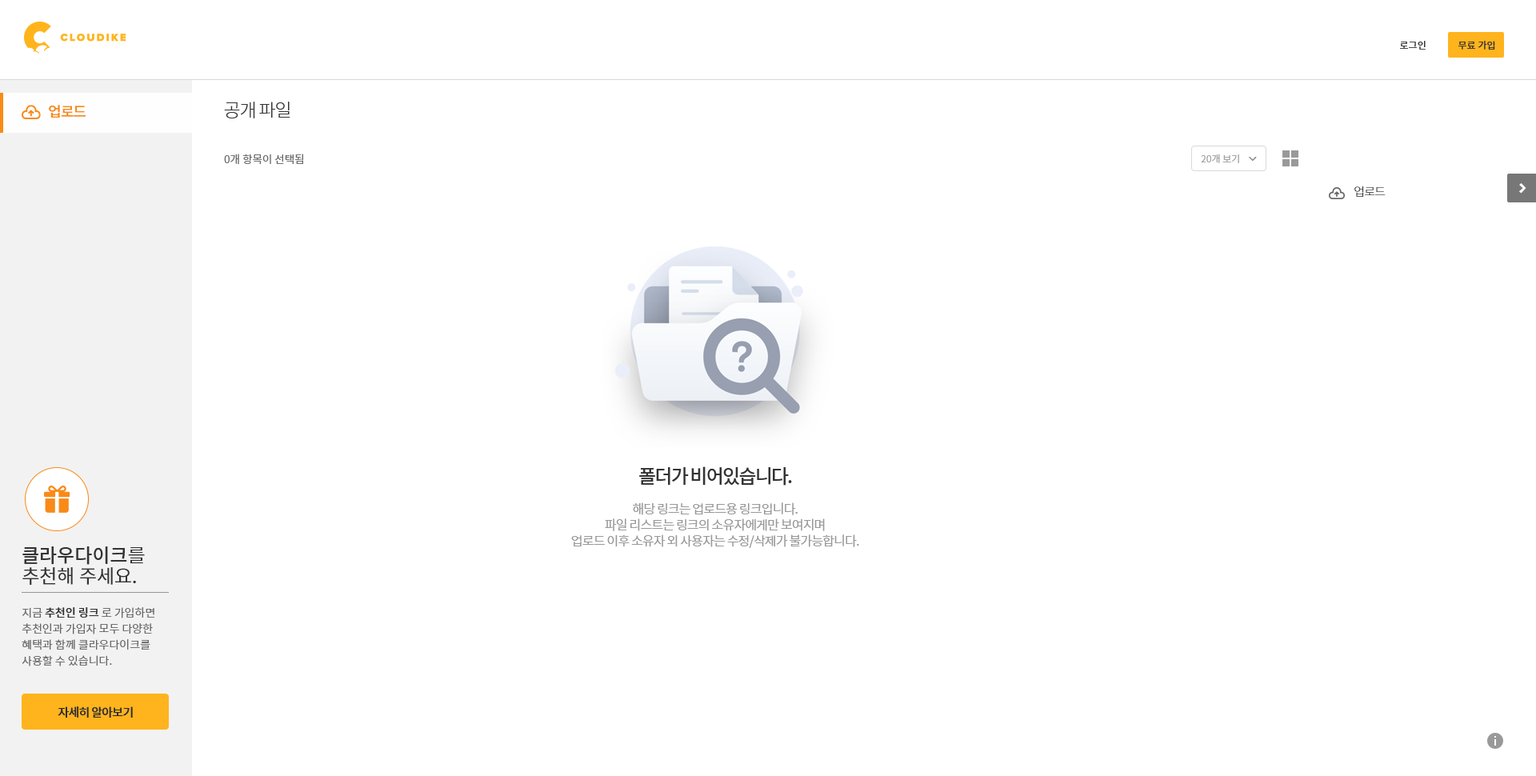
<style>
.page{position:relative;width:1536px;height:776px;background:#ffffff}
.page>*{position:absolute;margin:0}
.t1{font:9.6px "NotoSansCJKkr-Medium";color:#333333}
.t2{font:18.4px "NotoSansCJKkr-Light";letter-spacing:-0.05em;color:#333333}
.t3{font:14.4px "NotoSansCJKkr-Medium";letter-spacing:-0.05em;color:#f98a17}
.t4{font:10.8px "NotoSansCJKkr-DemiLight";color:#666666}
.t5{font:9.6px "NotoSansCJKkr-DemiLight";color:#a1a1a1}
.t6{font:12px "NotoSansCJKkr-Light";letter-spacing:-0.05em;color:#333333}
.t7{font:19.2px "NotoSansCJKkr-Medium";letter-spacing:-0.075em;color:#333333}
.t8{font:12.8px/16px "NotoSansCJKkr-DemiLight";letter-spacing:-0.05em;color:#999999}
.t9{font:19.2px/20.8px "NotoSansCJKkr-DemiLight";color:#333333}
.t10{font:19.2px/20.8px "NotoSansCJKkr-Medium";color:#333333}
.t11{font:11.2px/16px "NotoSansCJKkr-DemiLight";color:#666666}
.t12{font:11.2px/16px "NotoSansCJKkr-Medium";color:#333333}
.t13{font:12px "NotoSansCJKkr-Medium";letter-spacing:-0.05em;color:#2d2d2d}
</style>
<div class="page">
<p class="t1" style="left:1400px;top:41px;width:26px;height:9px">로그인</p>
<p class="t1" style="left:1459px;top:41px;width:37px;height:9px">무료 가입</p>
<p class="t2" style="left:224px;top:102px;width:66px;height:16px">공개 파일</p>
<p class="t3" style="left:49px;top:105px;width:37px;height:13px">업로드</p>
<p class="t4" style="left:224px;top:154px;width:79px;height:11px">0개 항목이 선택됨</p>
<p class="t5" style="left:1201px;top:154px;width:38px;height:9px">20개 보기</p>
<p class="t6" style="left:1355px;top:186px;width:31px;height:11px">업로드</p>
<p class="t7" style="left:639px;top:466px;width:153px;height:20px">폴더가 비어있습니다.</p>
<p class="t8" style="left:571px;top:503px;width:288px;height:45px;text-align:center">해당 링크는 업로드용 링크입니다.<br>파일 리스트는 링크의 소유자에게만 보여지며<br>업로드 이후 소유자 외 사용자는 수정/삭제가 불가능합니다.</p>
<p class="t9" style="left:22px;top:547px;width:123px;height:38px"><span class="t10">클라우다이크</span>를 <br>추천해 주세요.</p>
<p class="t11" style="left:22px;top:607px;width:132px;height:60px">지금 <span class="t12">추천인 링크</span> 로 가입하면<br>추천인과 가입자 모두 다양한 <br>혜택과 함께 클라우다이크를 <br>사용할 수 있습니다.</p>
<p class="t13" style="left:58px;top:707px;width:75px;height:12px">자세히 알아보기</p>
</div>
